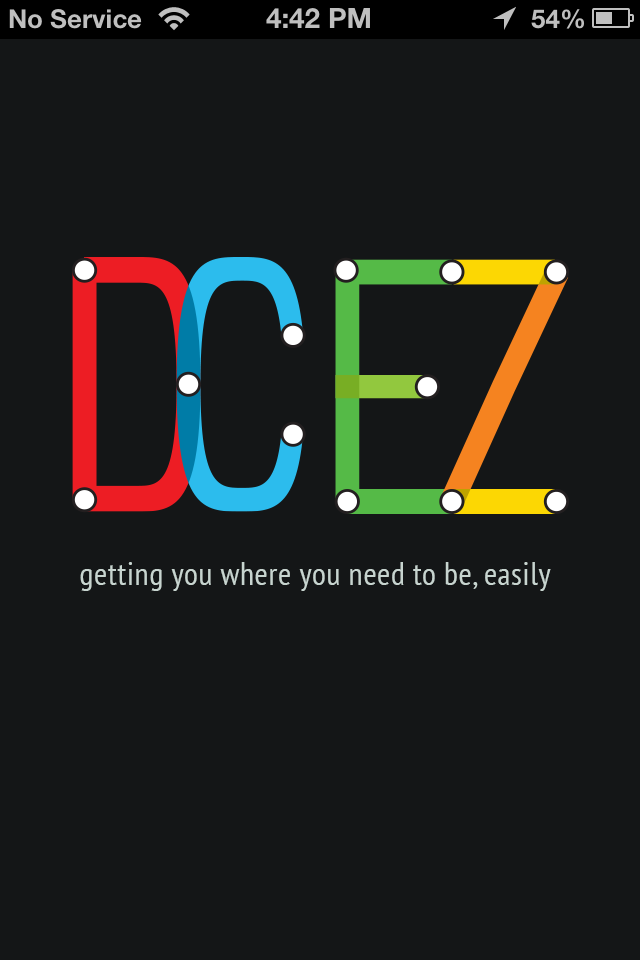
<style>
.page{position:relative;width:640px;height:960px;background:#141617}
.page>*{position:absolute;margin:0}
.t1{font:31.7px "PTSans-Narrow";letter-spacing:0.025em;color:#c7d4cf}
</style>
<div class="page">
<p class="t1" style="left:80px;top:562px;width:471px;height:29px">getting you where you need to be, easily</p>
</div>
